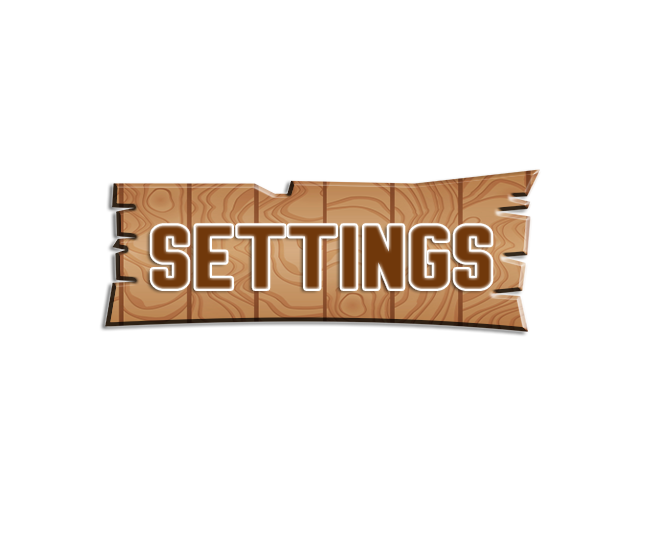
<style>
.page{position:relative;width:650px;height:536px;background:#ffffff}
.page>*{position:absolute;margin:0}
.t1{font:70px "BrewmasterGothicRound";color:#70380b;scale:1.26 1}
</style>
<div class="page">
<p class="t1" style="left:151px;top:225px;width:341px;height:64px">settings</p>
</div>
